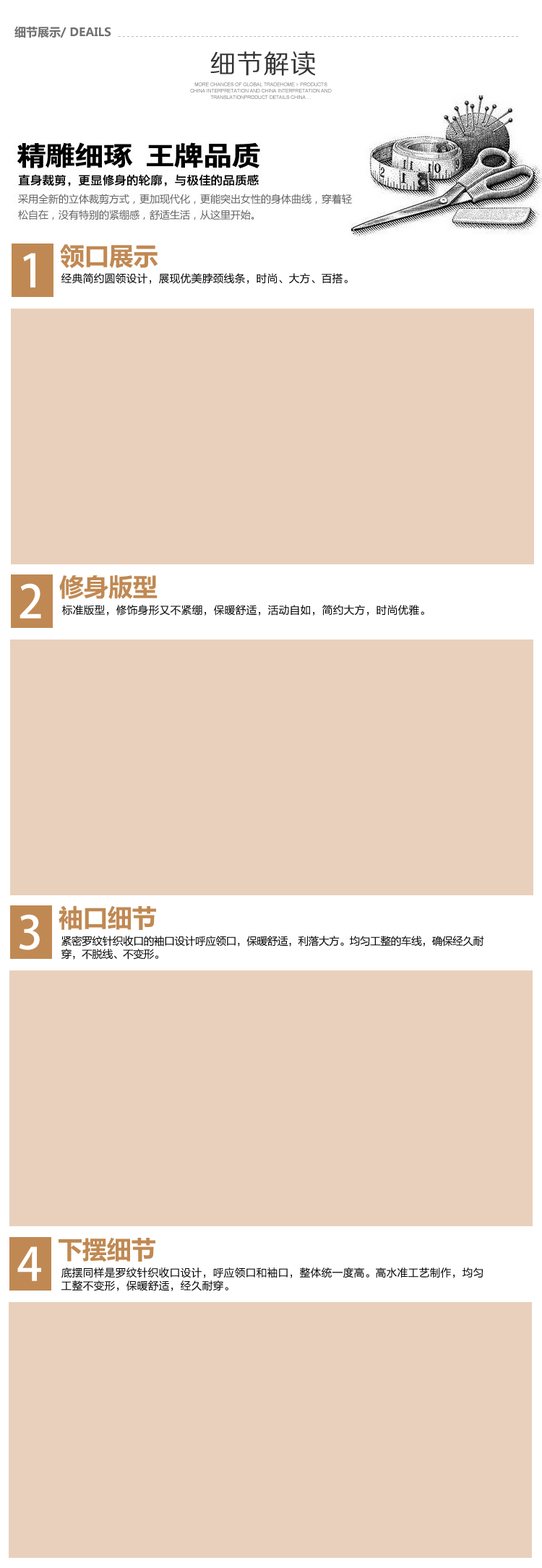
<style>
.page{position:relative;width:542px;height:1568px;background:#e9d0bc}
.page>*{position:absolute;margin:0}
.t1{font:11.6px "MicrosoftYaHei";color:#717070;text-transform:uppercase}
.t2{font:11.6px "Acid";letter-spacing:0.1em;text-transform:uppercase}
.t3{font:26px "FZZXHJW--GB1-0";color:#353535;font-weight:bold}
.t4{font:4.8px/6.4px "ArialMT";color:#727272;text-transform:uppercase}
.t5{font:24.5px "MicrosoftYaHei";color:#c08953}
.t6{font:45.4px "AdobeHeitiStd-Regular";color:#ffffff}
.t7{font:10.8px "FZLTHJW--GB1-0";color:#000000}
.t8{font:10.8px/13px "FZLTHJW--GB1-0";letter-spacing:-0.05em;color:#000000}
.t9{font:10.8px/13px "FZLTHJW--GB1-0";color:#000000}
</style>
<div class="page">
<p class="t1" style="left:14px;top:26px;width:97px;height:12px">细节展示/ DEAILS</p>
<p class="t2" style="left:118px;top:36px;width:400px;height:1px">--------------------------------------------------------------------------------------------</p>
<p class="t3" style="left:210px;top:51px;width:105px;height:25px">细节解读</p>
<p class="t4" style="left:190px;top:82px;width:142px;height:17px;text-align:center">More Chances of Global TradeHome &gt; Products<br>China Interpretation And China Interpretation And<br>TranslationProduct Details China ...</p>
<p class="t5" style="left:60px;top:244px;width:98px;height:24px">领口展示</p>
<p class="t6" style="left:23px;top:253px;width:12px;height:35px">1</p>
<p class="t7" style="left:61px;top:273px;width:287px;height:11px">经典简约圆领设计，展现优美脖颈线条，时尚、大方、百搭。</p>
<p class="t5" style="left:59px;top:575px;width:99px;height:24px">修身版型</p>
<p class="t6" style="left:20px;top:583px;width:21px;height:36px">2</p>
<p class="t7" style="left:62px;top:605px;width:362px;height:11px">标准版型，修饰身形又不紧绷，保暖舒适，活动自如，简约大方，时尚优雅。</p>
<p class="t5" style="left:59px;top:905px;width:97px;height:25px">袖口细节</p>
<p class="t6" style="left:19px;top:914px;width:21px;height:36px">3</p>
<p class="t8" style="left:61px;top:936px;width:423px;height:24px">紧密罗纹针织收口的袖口设计呼应领口，保暖舒适，利落大方。均匀工整的车线，确保经久耐穿，不脱线、不变形。</p>
<p class="t5" style="left:59px;top:1237px;width:96px;height:25px">下摆细节</p>
<p class="t6" style="left:17px;top:1246px;width:24px;height:35px">4</p>
<p class="t9" style="left:61px;top:1267px;width:422px;height:24px">底摆同样是罗纹针织收口设计，呼应领口和袖口，整体统一度高。高水准工艺制作，均匀工整不变形，保暖舒适，经久耐穿。</p>
</div>
